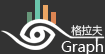
<style>
.page{position:relative;width:105px;height:54px;background:#333333}
.page>*{position:absolute;margin:0}
.t1{font:10.4px "MicrosoftYaHei";color:#ffffff}
.t2{font:14.6px "MicrosoftYaHei";color:#ffffff}
</style>
<div class="page">
<p class="t1" style="left:71px;top:25px;width:32px;height:11px">格拉夫</p>
<p class="t2" style="left:61px;top:40px;width:42px;height:16px">Graph</p>
</div>
